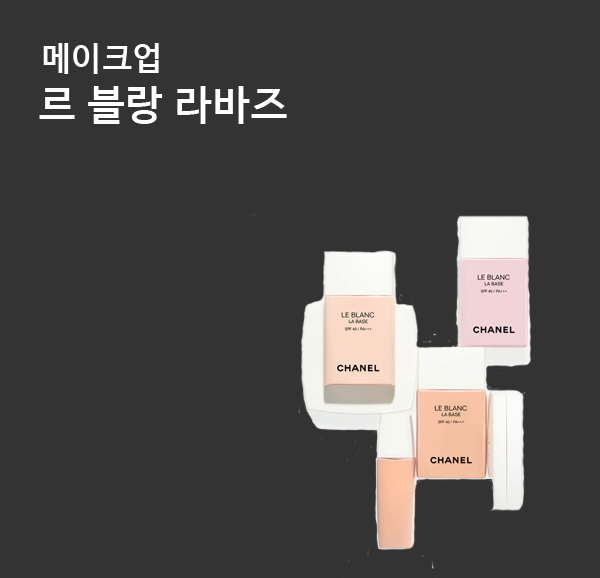
<style>
.page{position:relative;width:600px;height:578px;background:#333333}
.page>*{position:absolute;margin:0}
.t1{font:32.7px "HancomGothicBold";color:#ffffff}
.t2{font:40.8px "HancomGothicBold";color:#ffffff}
</style>
<div class="page">
<p class="t1" style="left:43px;top:43px;width:116px;height:31px">메이크업</p>
<p class="t2" style="left:39px;top:86px;width:248px;height:38px">르 블랑 라바즈</p>
</div>
